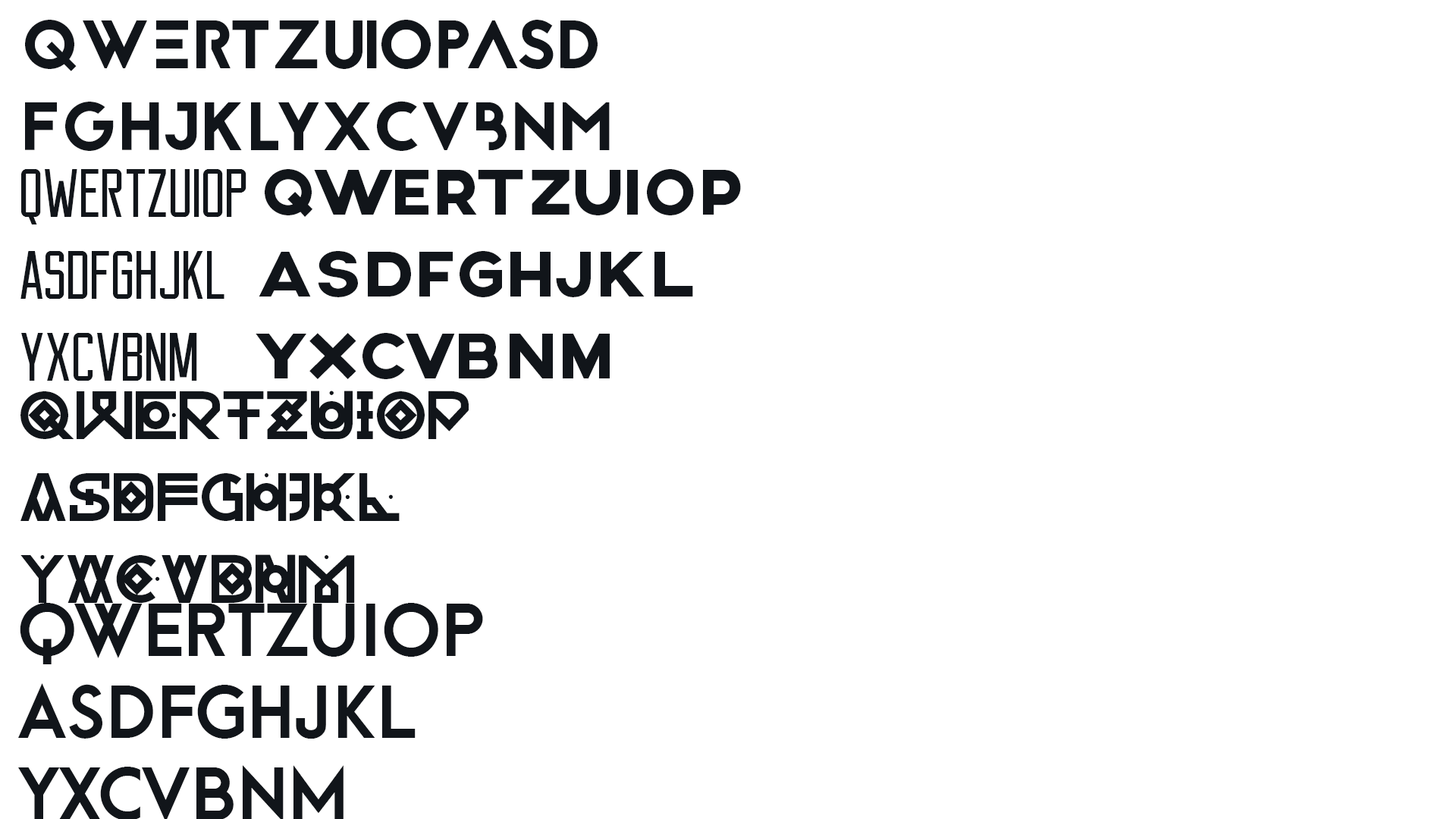
<style>
.page{position:relative;width:1456px;height:819px;background:#ffffff}
.page>*{position:absolute;margin:0}
.t1{font:68.2px "Jaapokkisubtract-Regular";color:#11151a}
.t2{font:68.2px "Reckoner";color:#11151a}
.t3{font:68.2px "Axis";color:#11151a}
.t4{font:68.2px "HECTICA";color:#11151a}
</style>
<div class="page">
<p class="t1" style="left:25px;top:20px;width:585px;height:131px;text-align:right">QWERTZUIOPASD<br>FGHJKLYXCVBNM</p>
<p class="t2" style="left:20px;top:169px;width:226px;height:212px;text-align:right">QWERTZUIOP<br>ASDFGHJKL<br>YXCVBNM</p>
<p class="t3" style="left:256px;top:169px;width:485px;height:210px;text-align:right">QWERTZUIOP<br>ASDFGHJKL<br>YXCVBNM</p>
<p class="t4" style="left:20px;top:391px;width:449px;height:212px;text-align:right">QWERTZUIOP<br>ASDFGHJKL<br>YXCVBNM</p>
</div>
